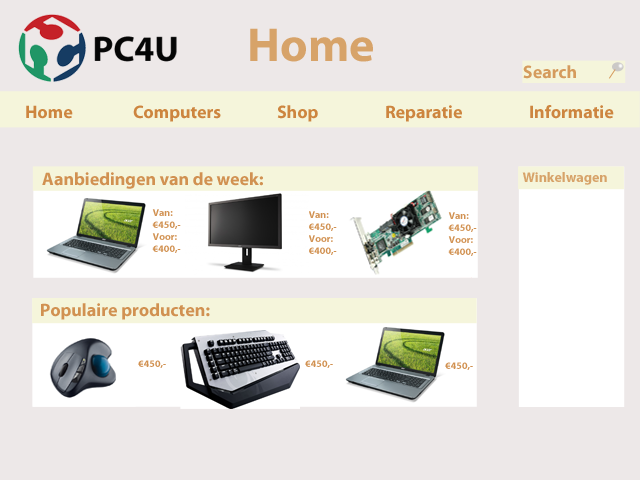
<style>
.page{position:relative;width:640px;height:480px;background:#ede8e8}
.page>*{position:absolute;margin:0}
.t1{font:48px "MyriadPro-Bold";color:#d7a369}
.t2{font:18px "MyriadPro-Bold";color:#d59b5d}
.t3{font:18px "MyriadPro-Bold";color:#cd853f}
.t4{font:18px "MyriadPro-Bold";color:#d19151}
.t5{font:14px "MyriadPro-Bold";color:#d7a369}
.t6{font:10px "MyriadPro-Bold";color:#d19151}
</style>
<div class="page">
<p class="t1" style="left:250px;top:28px;width:123px;height:34px">Home</p>
<p class="t2" style="left:523px;top:65px;width:53px;height:14px">Search</p>
<p class="t3" style="left:26px;top:105px;width:588px;height:17px">Home  Computers  Shop  Reparatie  Informatie</p>
<p class="t4" style="left:42px;top:172px;width:221px;height:17px">Aanbiedingen van de week:</p>
<p class="t5" style="left:522px;top:172px;width:85px;height:13px">Winkelwagen</p>
<p class="t6" style="left:152px;top:209px;width:29px;height:44px">Van:<br>€450,-<br>Voor:<br>€400,-</p>
<p class="t6" style="left:308px;top:211px;width:29px;height:44px">Van:<br>€450,-<br>Voor:<br>€400,-</p>
<p class="t6" style="left:448px;top:212px;width:29px;height:44px">Van:<br>€450,-<br>Voor:<br>€400,-</p>
<p class="t4" style="left:41px;top:303px;width:169px;height:17px">Populaire producten:</p>
<p class="t6" style="left:138px;top:360px;width:28px;height:8px">€450,-</p>
<p class="t6" style="left:305px;top:360px;width:28px;height:8px">€450,-</p>
<p class="t6" style="left:445px;top:362px;width:28px;height:8px">€450,-</p>
</div>
